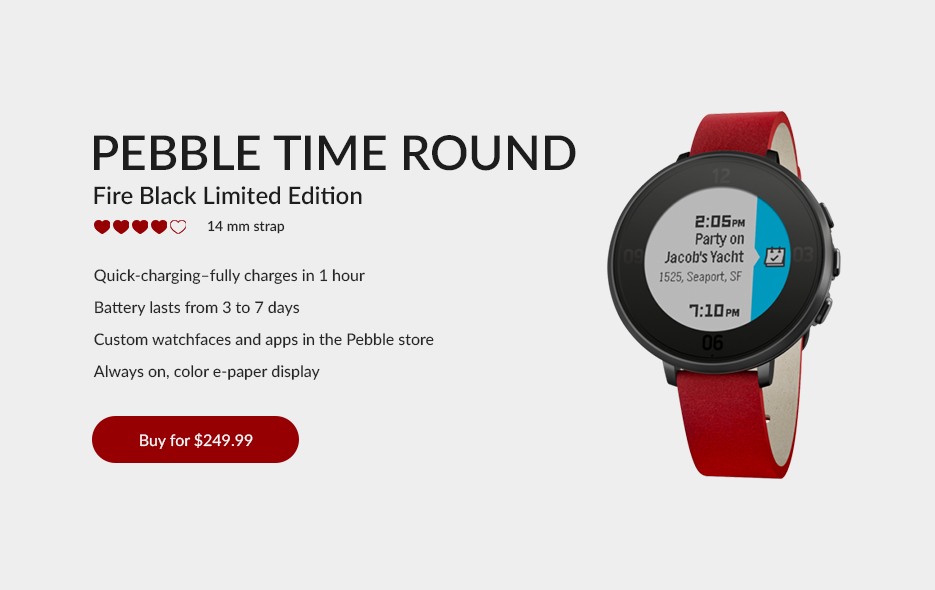
<style>
.page{position:relative;width:935px;height:590px;background:#eeeeee}
.page>*{position:absolute;margin:0}
.t1{font:48px "Lato-Semibold";color:#1d1d1d}
.t2{font:24px "Lato-Semibold";color:#1d1d1d}
.t3{font:14px "Lato-Semibold";color:#262626}
.t4{font:16px "Lato-Medium";color:#262626}
.t5{font:16px "Lato-Medium";color:#f7f7f7}
</style>
<div class="page">
<p class="t1" style="left:94px;top:135px;width:482px;height:36px">PEBBLE TIME ROUND</p>
<p class="t2" style="left:94px;top:186px;width:268px;height:19px">Fire Black Limited Edition</p>
<p class="t3" style="left:208px;top:220px;width:77px;height:14px">14 mm strap</p>
<p class="t4" style="left:94px;top:269px;width:271px;height:16px">Quick-charging–fully charges in 1 hour</p>
<p class="t4" style="left:95px;top:301px;width:205px;height:15px">Battery lasts from 3 to 7 days</p>
<p class="t4" style="left:94px;top:333px;width:340px;height:15px">Custom watchfaces and apps in the Pebble store</p>
<p class="t4" style="left:93px;top:365px;width:227px;height:15px">Always on, color e-paper display</p>
<p class="t5" style="left:140px;top:433px;width:113px;height:16px">Buy for $249.99</p>
</div>
